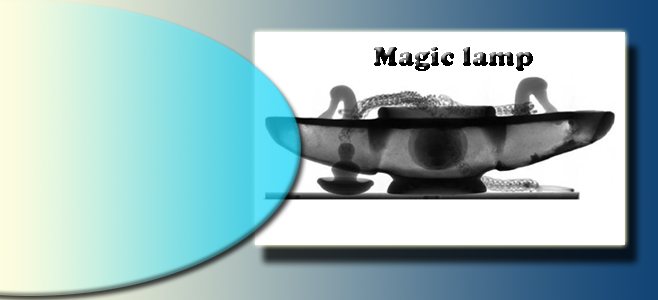
<style>
.page{position:relative;width:658px;height:300px}
.page>*{position:absolute;margin:0}
.t1{font:28px "CooperBlack";color:#090808}
</style>
<div class="page">
<p class="t1" style="left:374px;top:47px;width:159px;height:24px">Magic lamp</p>
</div>
